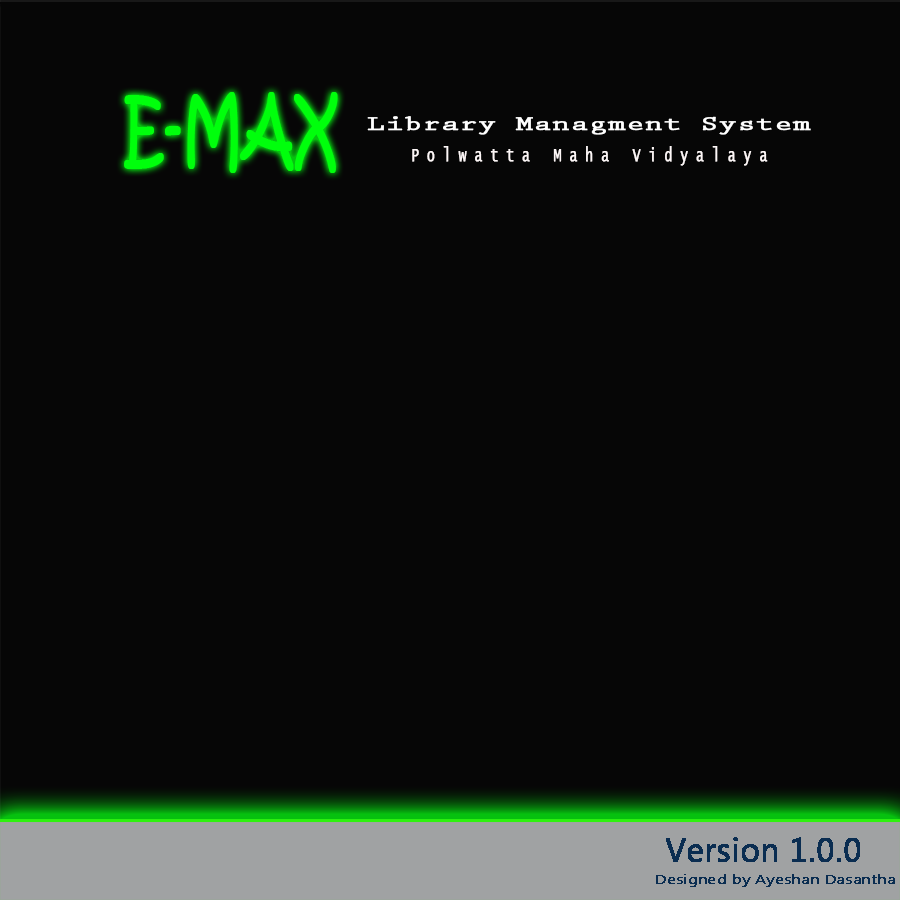
<style>
.page{position:relative;width:900px;height:900px;background:#060606}
.page>*{position:absolute;margin:0}
.t1{font:84px "KristenITC-Regular";color:#00ff0c;font-weight:bold;scale:0.66 1}
.t2{font:21.1px "PrestigeEliteStd-Bd";color:#ffffff;font-weight:bold;scale:1.4 1}
.t3{font:19.4px "LucidaConsole";letter-spacing:0.6em;color:#fdf7f7;font-weight:bold;scale:0.66 1}
.t4{font:33.2px "MicrosoftTaiLe";color:#0a2d51;font-weight:bold}
.t5{font:13.2px "MicrosoftTaiLe";color:#0a2d51;font-weight:bold;scale:1.19 1}
</style>
<div class="page">
<p class="t1" style="left:124px;top:92px;width:214px;height:81px">E-MAX</p>
<p class="t2" style="left:367px;top:116px;width:444px;height:19px">Library Managment System</p>
<p class="t3" style="left:412px;top:146px;width:356px;height:20px">Polwatta Maha Vidyalaya</p>
<p class="t4" style="left:666px;top:837px;width:194px;height:25px">Version 1.0.0</p>
<p class="t5" style="left:656px;top:874px;width:239px;height:13px">Designed by Ayeshan Dasantha</p>
</div>
